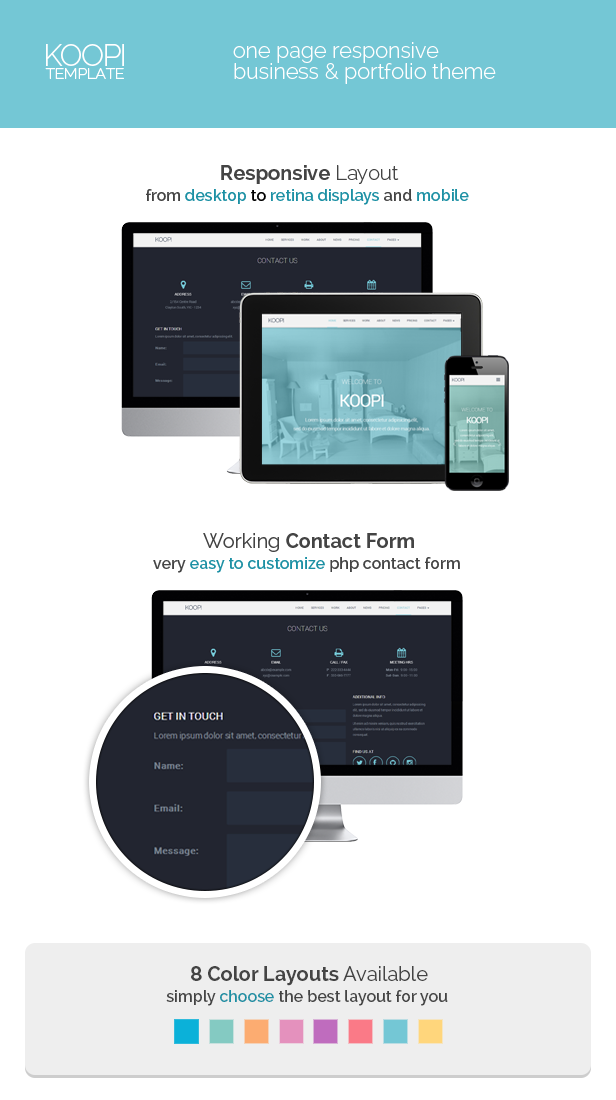
<style>
.page{position:relative;width:616px;height:1100px;background:#ffffff}
.page>*{position:absolute;margin:0}
.t1{font:30px "Raleway-Light";letter-spacing:-0.048em;color:#ffffff;font-variant:small-caps}
.t2{font:21.7px/21.7px "Raleway-Light";color:#ffffff}
.t3{font:19.5px "Raleway-Light";letter-spacing:-0.048em;color:#ffffff;font-variant:small-caps}
.t4{font:20px "Raleway-Bold";color:#444444}
.t5{font:20px "Raleway-Light";color:#444444}
.t6{font:16px "Raleway-SemiBold";color:#1c90a4}
.t7{font:16px "Raleway-SemiBold";color:#444444}
.t8{font:16px "Raleway-SemiBold";color:#000000}
.t9{font:20px "Raleway-Regular";color:#444444}
</style>
<div class="page">
<p class="t1" style="left:46px;top:44px;width:78px;height:22px">KOOPI</p>
<p class="t2" style="left:233px;top:42px;width:263px;height:42px">one page responsive<br>business &amp; portfolio theme</p>
<p class="t3" style="left:45px;top:68px;width:79px;height:11px">template</p>
<p class="t4" style="left:221px;top:165px;width:178px;height:19px">Responsive<span class="t5"> Layout</span></p>
<p class="t6" style="left:146px;top:189px;width:323px;height:16px"><span class="t7">from </span>desktop<span class="t8"> to </span>retina displays <span class="t7">and </span>mobile</p>
<p class="t4" style="left:203px;top:533px;width:211px;height:19px"><span class="t9">Working </span>Contact Form</p>
<p class="t6" style="left:153px;top:557px;width:307px;height:16px"><span class="t7">very </span>easy to customize <span class="t7">php contact form</span></p>
<p class="t4" style="left:191px;top:966px;width:237px;height:20px">8 Color Layouts <span class="t9">Available</span></p>
<p class="t7" style="left:166px;top:990px;width:282px;height:16px">simply <span class="t6">choose </span>the best layout for you</p>
</div>
